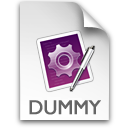
<style>
.page{position:relative;width:128px;height:128px;background:#ffffff}
.page>*{position:absolute;margin:0}
.t1{font:20px "GillSans";letter-spacing:-0.025em;color:#656565;font-weight:bold}
</style>
<div class="page">
<p class="t1" style="left:29px;top:100px;width:72px;height:15px">DUMMY</p>
</div>
